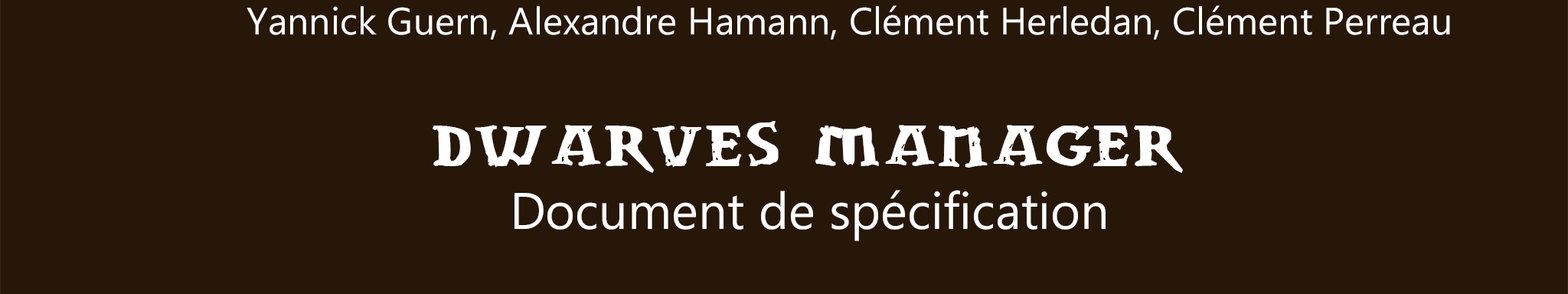
<style>
.page{position:relative;width:1568px;height:294px;background:#271709}
.page>*{position:absolute;margin:0}
.t1{font:38px "Ebrima";color:#ffffff}
.t2{font:18.5px "drwnstcr";color:#ffffff}
.t3{font:51.2px "Ebrima";color:#ffffff}
</style>
<div class="page">
<p class="t1" style="left:247px;top:5px;width:1203px;height:35px">Yannick Guern, Alexandre Hamann, Clément Herledan, Clément Perreau</p>
<p class="t2" style="left:433px;top:121px;width:750px;height:52px">Dwarves Manager</p>
<p class="t3" style="left:514px;top:190px;width:592px;height:51px">Document de spécification</p>
</div>
